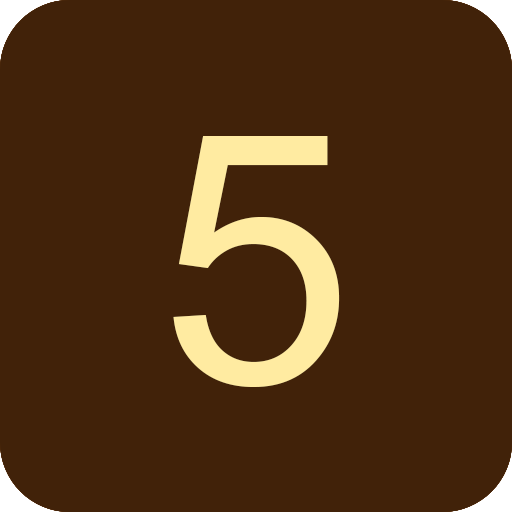
<style>
.page{position:relative;width:512px;height:512px;background:#412209}
.page>*{position:absolute;margin:0}
.t1{font:349px "ArialMT";color:#ffeba1}
</style>
<div class="page">
<p class="t1" style="left:173px;top:136px;width:167px;height:251px">5</p>
</div>
